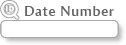
<style>
.page{position:relative;width:126px;height:45px;background:#ffffff}
.page>*{position:absolute;margin:0}
.t1{font:14px "AmiraParadiso";letter-spacing:0.05em;color:#646464}
</style>
<div class="page">
<p class="t1" style="left:25px;top:6px;width:89px;height:10px">Date Number</p>
</div>
